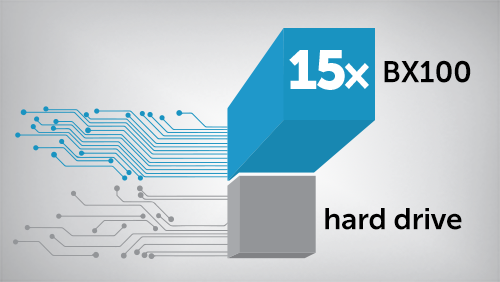
<style>
.page{position:relative;width:500px;height:282px}
.page>*{position:absolute;margin:0}
.t1{font:30px "MuseoSans-700";letter-spacing:-0.01em;color:#000000}
</style>
<div class="page">
<p class="t1" style="left:384px;top:60px;width:87px;height:23px">BX100</p>
<p class="t1" style="left:325px;top:208px;width:137px;height:22px">hard drive</p>
</div>
